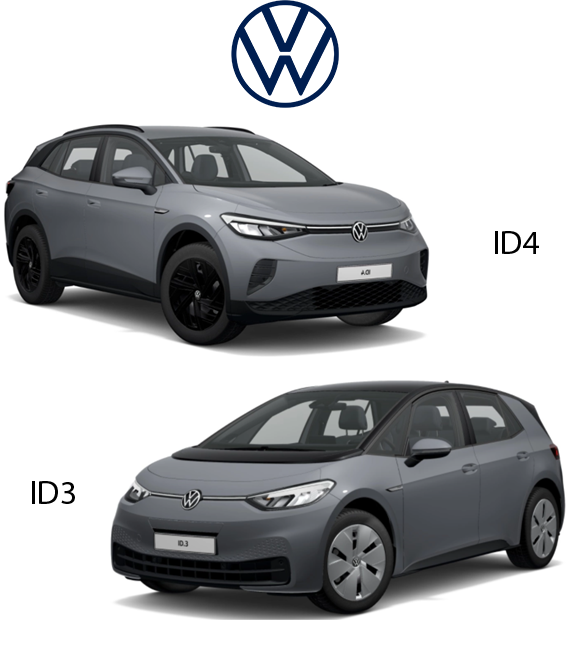
<style>
.page{position:relative;width:570px;height:660px;background:#ffffff}
.page>*{position:absolute;margin:0}
.t1{font:33.3px "MyriadPro-Regular";color:#010101}
</style>
<div class="page">
<p class="t1" style="left:495px;top:231px;width:44px;height:23px">ID4</p>
<p class="t1" style="left:32px;top:481px;width:43px;height:23px">ID3</p>
</div>
